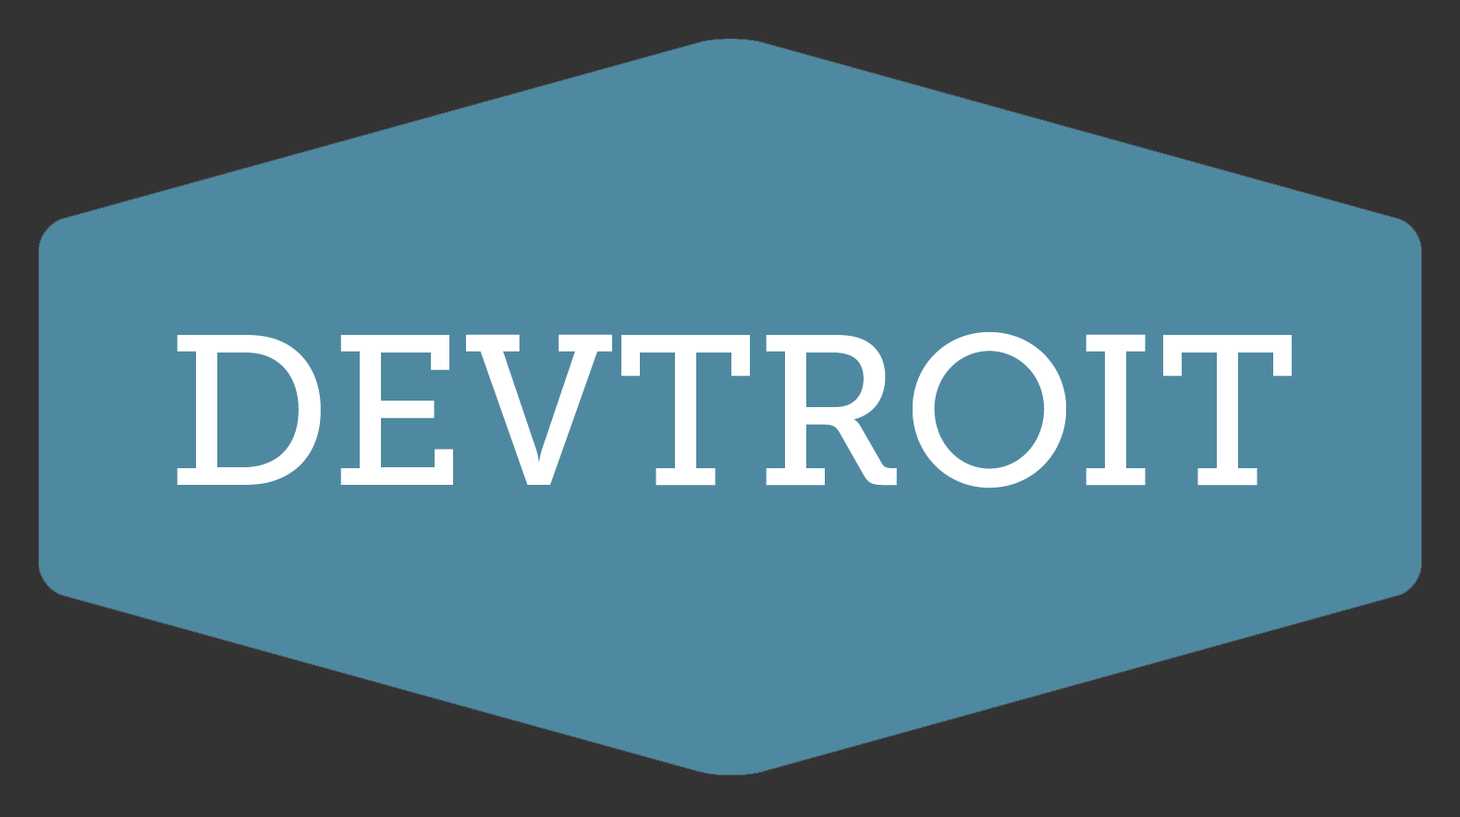
<style>
.page{position:relative;width:1460px;height:817px;background:#4f89a1}
.page>*{position:absolute;margin:0}
.t1{font:211.9px "MuseoSlab-500";color:#ffffff}
</style>
<div class="page">
<p class="t1" style="left:177px;top:331px;width:1115px;height:157px">DEVTROIT</p>
</div>
